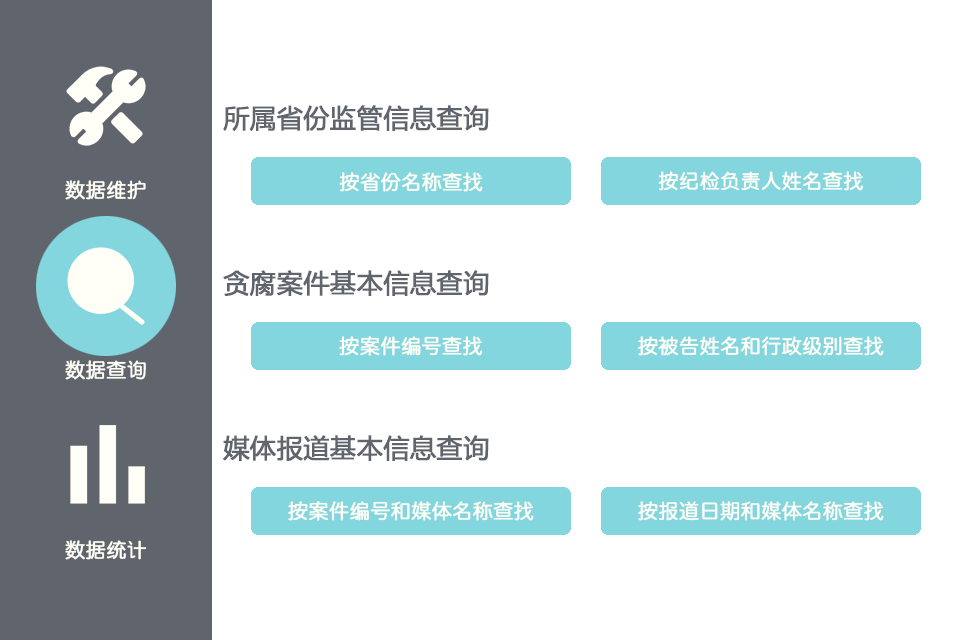
<style>
.page{position:relative;width:960px;height:640px;background:#ffffff}
.page>*{position:absolute;margin:0}
.t1{font:25.9px "MicrosoftYaHei";color:#60646d;font-weight:bold}
.t2{font:20px "QingYuanMono";color:#fffff7;font-weight:bold}
</style>
<div class="page">
<p class="t1" style="left:223px;top:105px;width:266px;height:26px">所属省份监管信息查询</p>
<p class="t2" style="left:339px;top:172px;width:144px;height:20px">按省份名称查找</p>
<p class="t2" style="left:658px;top:171px;width:205px;height:20px">按纪检负责人姓名查找</p>
<p class="t2" style="left:65px;top:180px;width:81px;height:20px">数据维护</p>
<p class="t1" style="left:223px;top:270px;width:266px;height:26px">贪腐案件基本信息查询</p>
<p class="t2" style="left:339px;top:336px;width:144px;height:20px">按案件编号查找</p>
<p class="t2" style="left:638px;top:336px;width:246px;height:20px">按被告姓名和行政级别查找</p>
<p class="t2" style="left:65px;top:360px;width:81px;height:20px">数据查询</p>
<p class="t1" style="left:223px;top:435px;width:266px;height:26px">媒体报道基本信息查询</p>
<p class="t2" style="left:288px;top:501px;width:246px;height:20px">按案件编号和媒体名称查找</p>
<p class="t2" style="left:638px;top:501px;width:246px;height:20px">按报道日期和媒体名称查找</p>
<p class="t2" style="left:65px;top:540px;width:81px;height:20px">数据统计</p>
</div>
